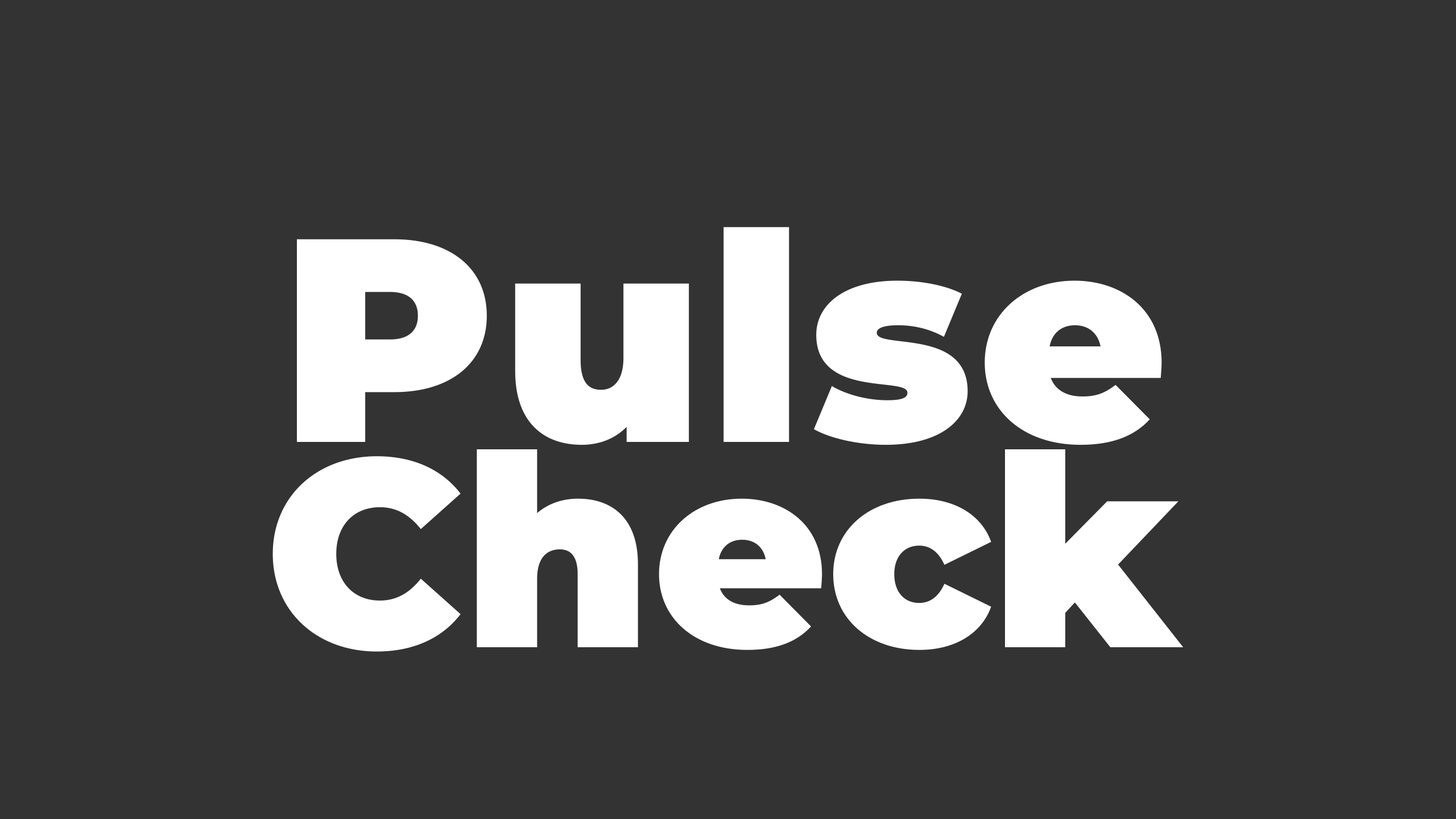
<style>
.page{position:relative;width:1456px;height:819px;background:#333333}
.page>*{position:absolute;margin:0}
.t1{font:289.5px "Montserrat-Black";letter-spacing:0.02em;color:#ffffff}
.t2{font:266.7px "Montserrat-Black";color:#ffffff}
</style>
<div class="page">
<p class="t1" style="left:297px;top:227px;width:865px;height:218px">Pulse</p>
<p class="t2" style="left:272px;top:449px;width:912px;height:203px">Check</p>
</div>
